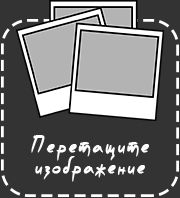
<style>
.page{position:relative;width:180px;height:198px;background:#333333}
.page>*{position:absolute;margin:0}
.t1{font:22px/21px "PFScandalPro-Black";letter-spacing:0.1em;color:#ffffff;font-weight:bold;scale:0.63 1}
</style>
<div class="page">
<p class="t1" style="left:31px;top:135px;width:118px;height:47px;text-align:center">Перетащите<br>изображение</p>
</div>
